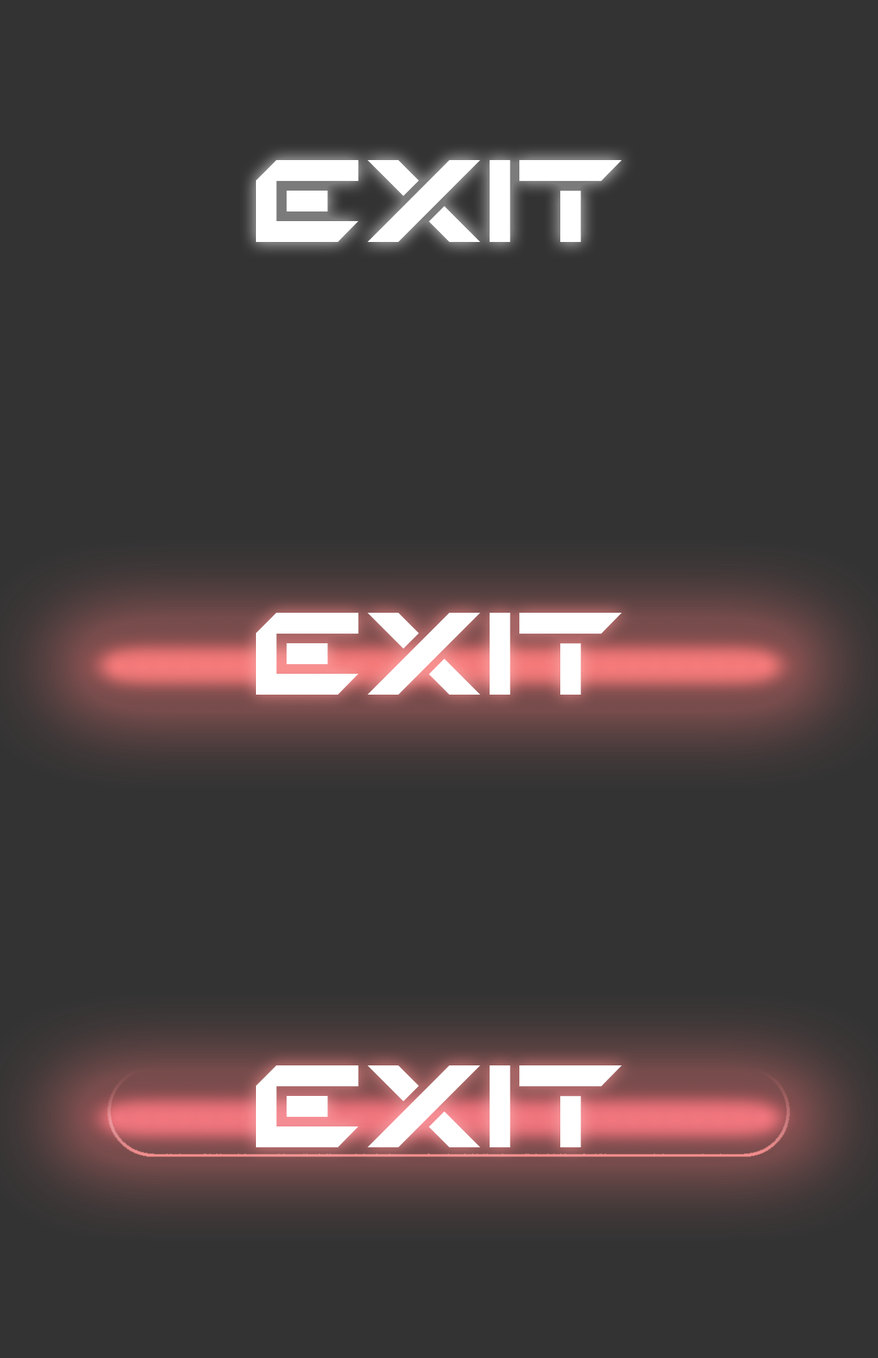
<style>
.page{position:relative;width:878px;height:1358px;background:#333333}
.page>*{position:absolute;margin:0}
.t1{font:163.5px "TechnoHideo";color:#ffffff}
</style>
<div class="page">
<p class="t1" style="left:256px;top:160px;width:366px;height:82px">EXIT</p>
<p class="t1" style="left:256px;top:613px;width:366px;height:81px">EXIT</p>
<p class="t1" style="left:256px;top:1065px;width:366px;height:82px">EXIT</p>
</div>
